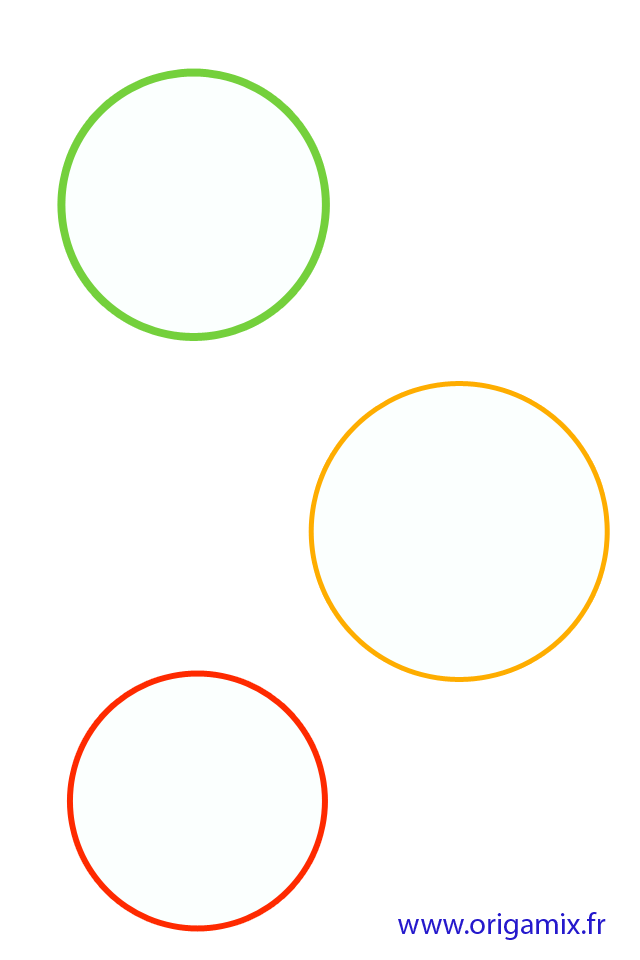
<style>
.page{position:relative;width:640px;height:960px;background:#ffffff}
.page>*{position:absolute;margin:0}
.t1{font:30px "MyriadPro-Regular";color:#2519cc}
</style>
<div class="page">
<p class="t1" style="left:398px;top:912px;width:208px;height:28px">www.origamix.fr</p>
</div>
